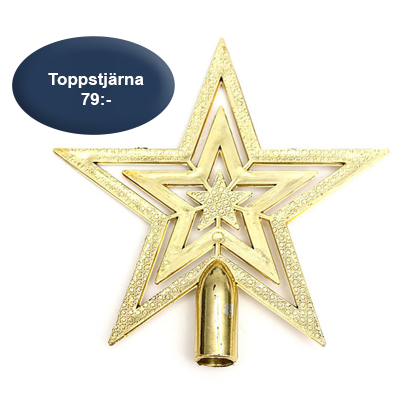
<style>
.page{position:relative;width:399px;height:404px;background:#ffffff}
.page>*{position:absolute;margin:0}
.t1{font:17px "Arial-BoldMT";color:#ffffff}
</style>
<div class="page">
<p class="t1" style="left:48px;top:73px;width:96px;height:32px;text-align:center">Toppstjärna <br>79:-</p>
</div>
